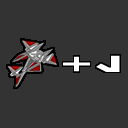
<style>
.page{position:relative;width:128px;height:128px;background:#333333}
.page>*{position:absolute;margin:0}
.t1{font:24px "MicrogrammaD-BoldExte";letter-spacing:-0.07em;color:#ffffff;scale:1.7 1}
</style>
<div class="page">
<p class="t1" style="left:63px;top:55px;width:57px;height:17px">+1</p>
</div>
